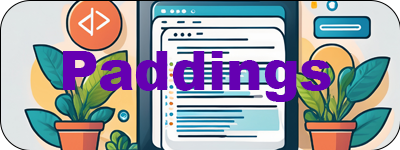
<style>
.page{position:relative;width:400px;height:150px}
.page>*{position:absolute;margin:0}
.t1{font:54.7px "Arial-Black";color:#6500b2}
</style>
<div class="page">
<p class="t1" style="left:63px;top:51px;width:268px;height:51px">Paddings</p>
</div>
